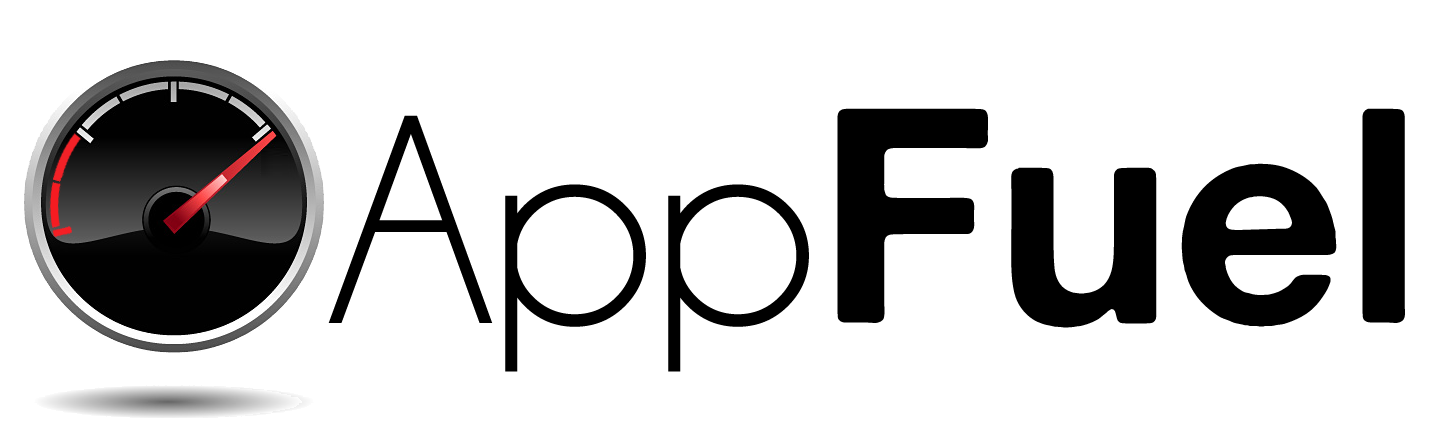
<style>
.page{position:relative;width:1440px;height:444px;background:#ffffff}
.page>*{position:absolute;margin:0}
.t1{font:300px "AlteHaasGrotesk_Bold";color:#000000}
.t2{font:300px "Champagne&Limousines";color:#000000}
</style>
<div class="page">
<p class="t1" style="left:328px;top:108px;width:1077px;height:264px"><span class="t2">App</span>Fuel</p>
</div>
